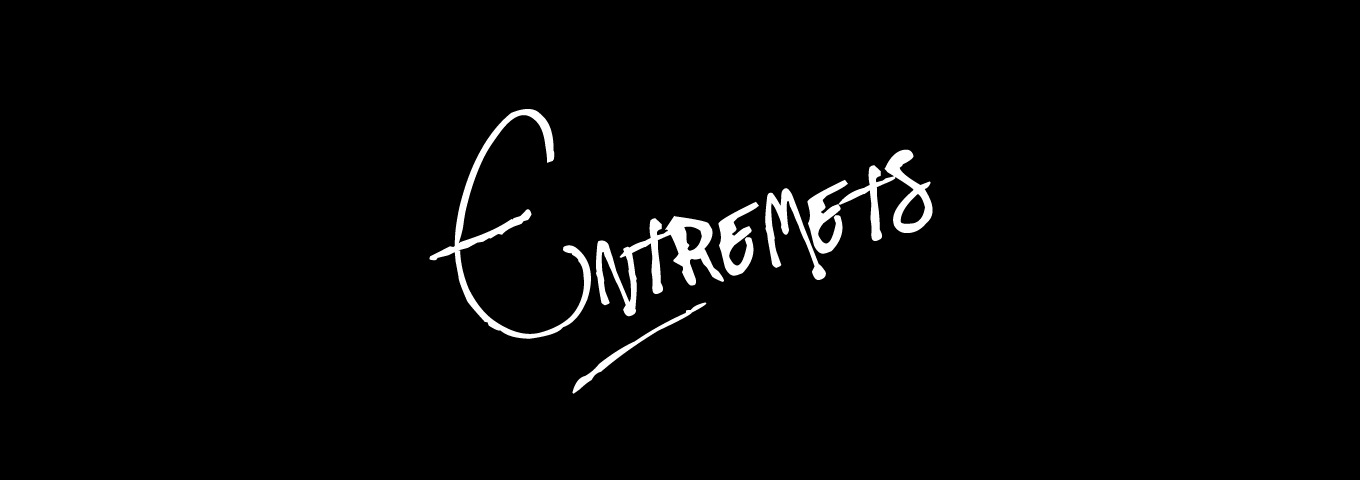
<style>
.page{position:relative;width:1360px;height:480px;background:#000000}
.page>*{position:absolute;margin:0}
.t1{font:330.9px "Pappo'sBluesBandOfficialFont";letter-spacing:-0.01em;color:#ffffff}
</style>
<div class="page">
<p class="t1" style="left:429px;top:109px;width:504px;height:285px;rotate:-14deg">Entremets</p>
</div>
